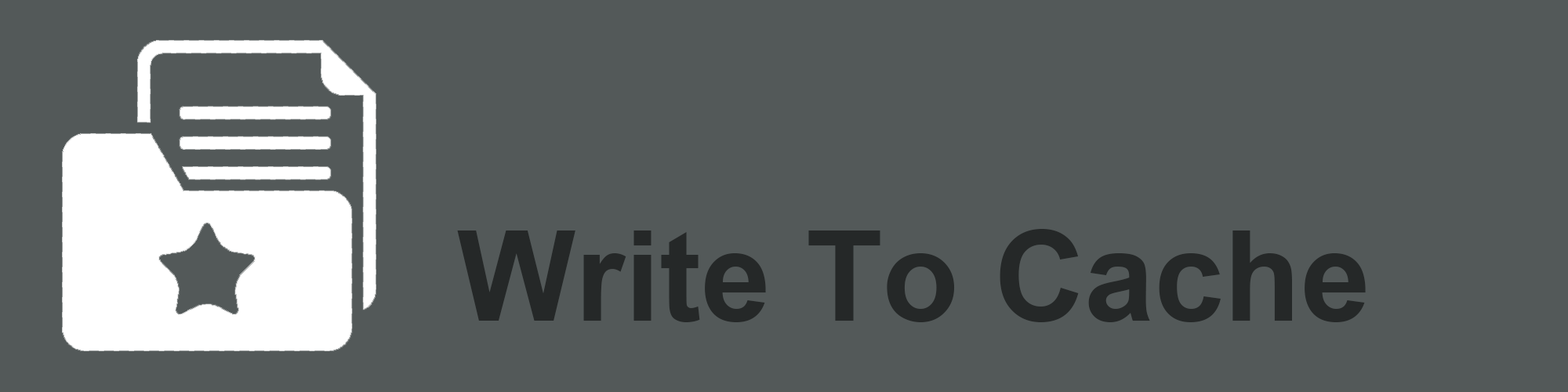
<style>
.page{position:relative;width:1568px;height:392px;background:#535959}
.page>*{position:absolute;margin:0}
.t1{font:125.4px "Arial-BoldMT";color:#252828}
</style>
<div class="page">
<p class="t1" style="left:457px;top:229px;width:909px;height:93px">Write To Cache</p>
</div>
